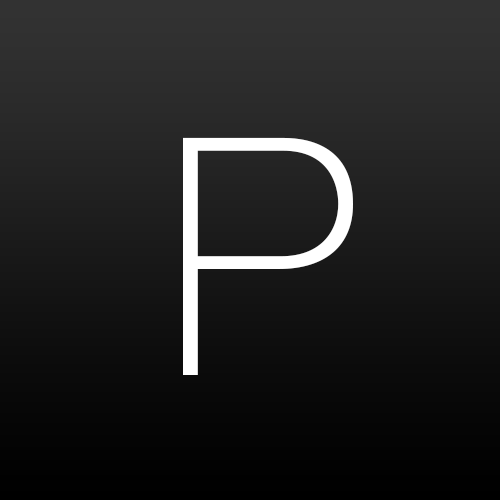
<style>
.page{position:relative;width:500px;height:500px}
.page>*{position:absolute;margin:0}
.t1{font:332.5px "HelveticaNeue-Thin";color:#ffffff}
</style>
<div class="page">
<p class="t1" style="left:183px;top:137px;width:170px;height:238px">P</p>
</div>
